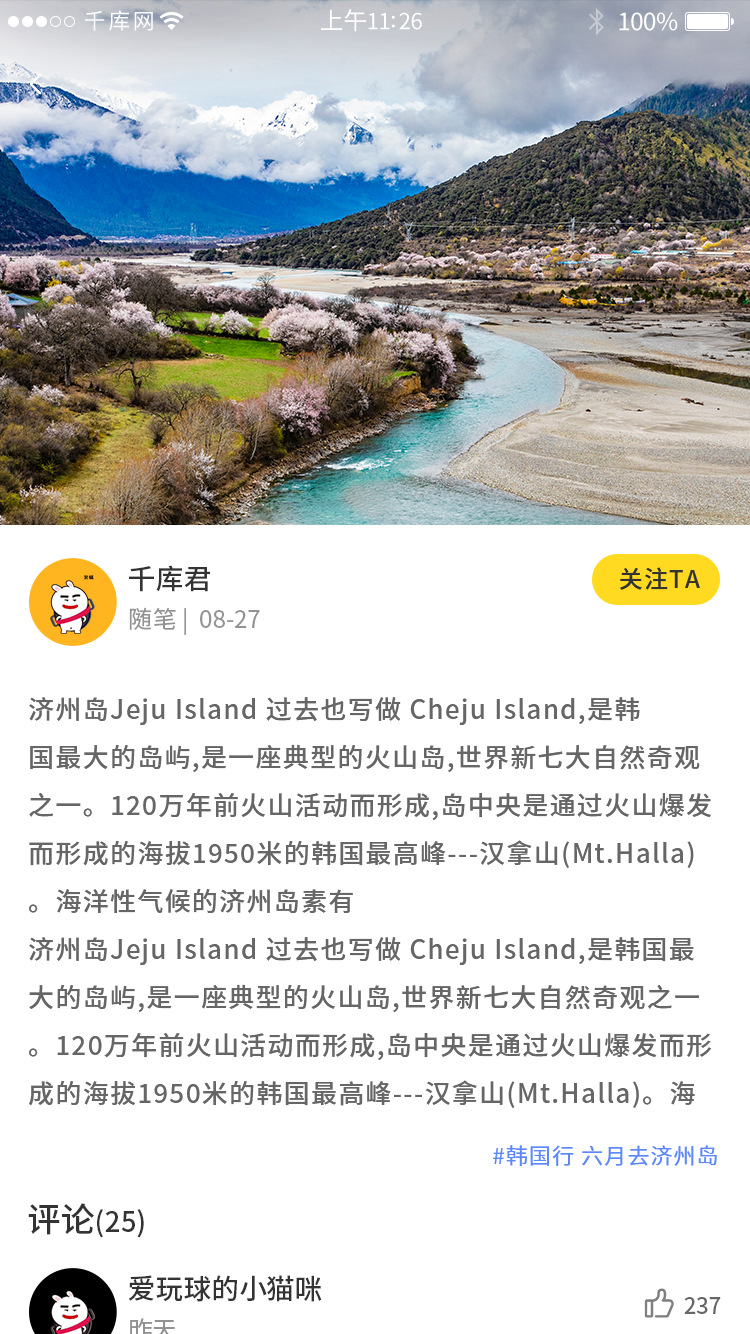
<style>
.page{position:relative;width:750px;height:1334px;background:#ffffff}
.page>*{position:absolute;margin:0}
.t1{font:27.8px "SourceHanSansSC-Medium";color:#333333}
.t2{font:24px "SourceHanSansSC-Medium";letter-spacing:0.05em;color:#333333}
.t3{font:24px "SourceHanSansSC-Regular";color:#929292}
.t4{font:26px/48px "SourceHanSansSC-Medium";letter-spacing:0.05em;color:#666666}
.t5{font:26px/48px "SourceHanSansSC-Medium";letter-spacing:0.05em;color:#333333}
.t6{font:22px "SourceHanSansSC-Regular";letter-spacing:0.05em;color:#5c89ff}
.t7{font:34px "SourceHanSansSC-Medium";color:#333333}
.t8{font:22px "SourceHanSansSC-Medium";color:#666666}
</style>
<div class="page">
<p class="t1" style="left:129px;top:565px;width:81px;height:27px">千库君</p>
<p class="t2" style="left:619px;top:567px;width:81px;height:23px">关注TA</p>
<p class="t3" style="left:129px;top:607px;width:131px;height:28px">随笔 |  08-27</p>
<p class="t4" style="left:29px;top:697px;width:683px;height:411px">济州岛Jeju Island 过去也写做 Cheju Island,是韩<br>国最大的岛屿,是一座典型的火山岛,世界新七大自然奇观之一。120万年前火山活动而形成,岛中央是通过火山爆发而形成的海拔1950米的韩国最高峰---汉拿山(Mt.Halla)。海洋性气候的济州岛素有<br>济州岛Jeju Island 过去也写做 Cheju Island,是韩国最大的岛屿,是一座典型的火山岛,世界新七大自然奇观之一。120万年前火山活动而形成,岛中央是通过火山爆发而形成的海拔1950米的韩国最高峰---汉拿山(Mt.Halla)。海<span class="t5">洋性气候的济州岛素有</span></p>
<p class="t6" style="left:493px;top:1145px;width:224px;height:21px">#韩国行 六月去济州岛</p>
<p class="t1" style="left:28px;top:1203px;width:116px;height:35px"><span class="t7">评论</span>(25)</p>
<p class="t1" style="left:128px;top:1275px;width:194px;height:27px">爱玩球的小猫咪</p>
<p class="t8" style="left:684px;top:1297px;width:37px;height:17px">237</p>
</div>
